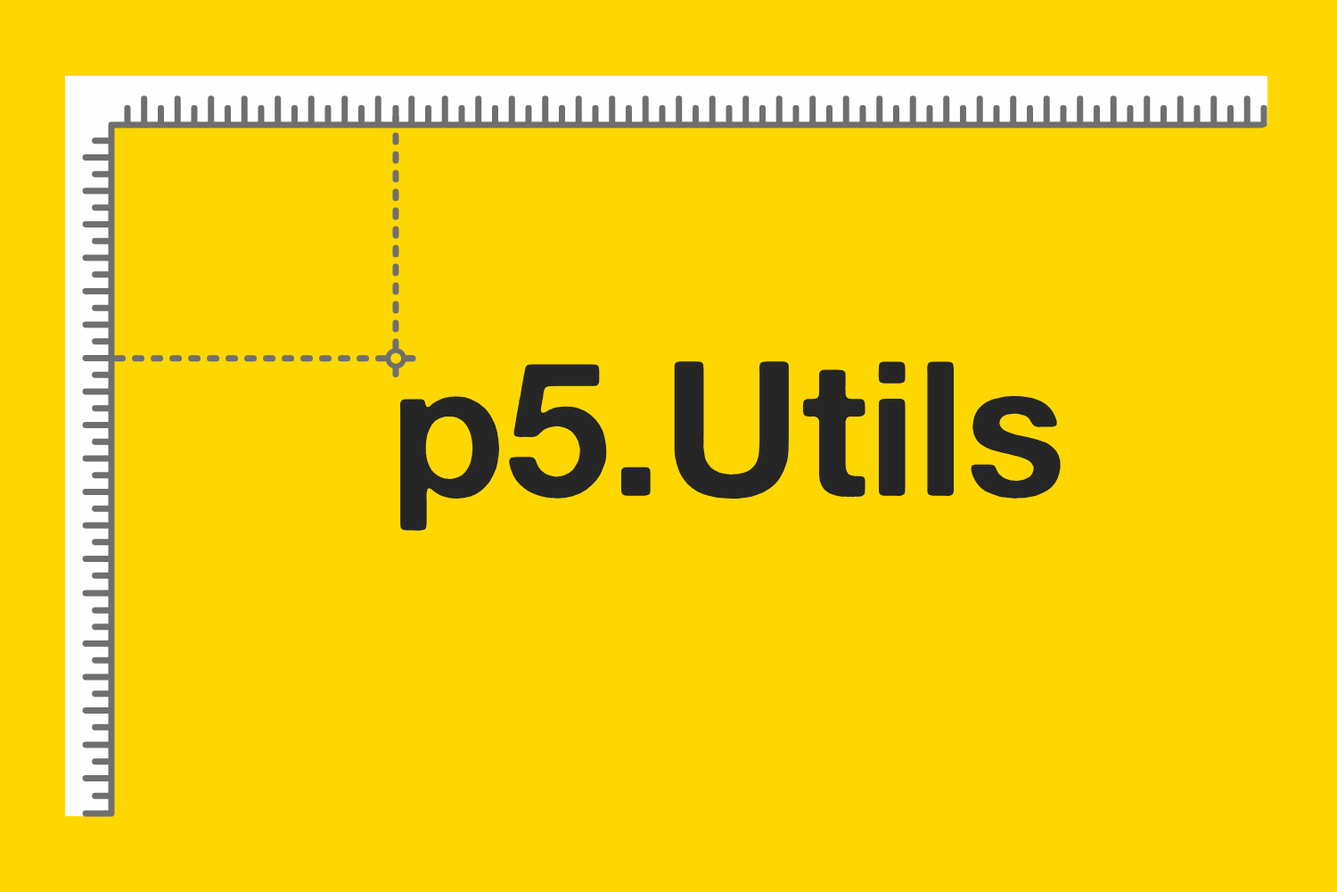
<style>
.page{position:relative;width:1337px;height:892px;background:#ffd700}
.page>*{position:absolute;margin:0}
.t1{font:188.2px "AlteHaasGrotesk_Bold";color:#262626}
</style>
<div class="page">
<p class="t1" style="left:399px;top:361px;width:662px;height:170px">p5.Utils</p>
</div>
